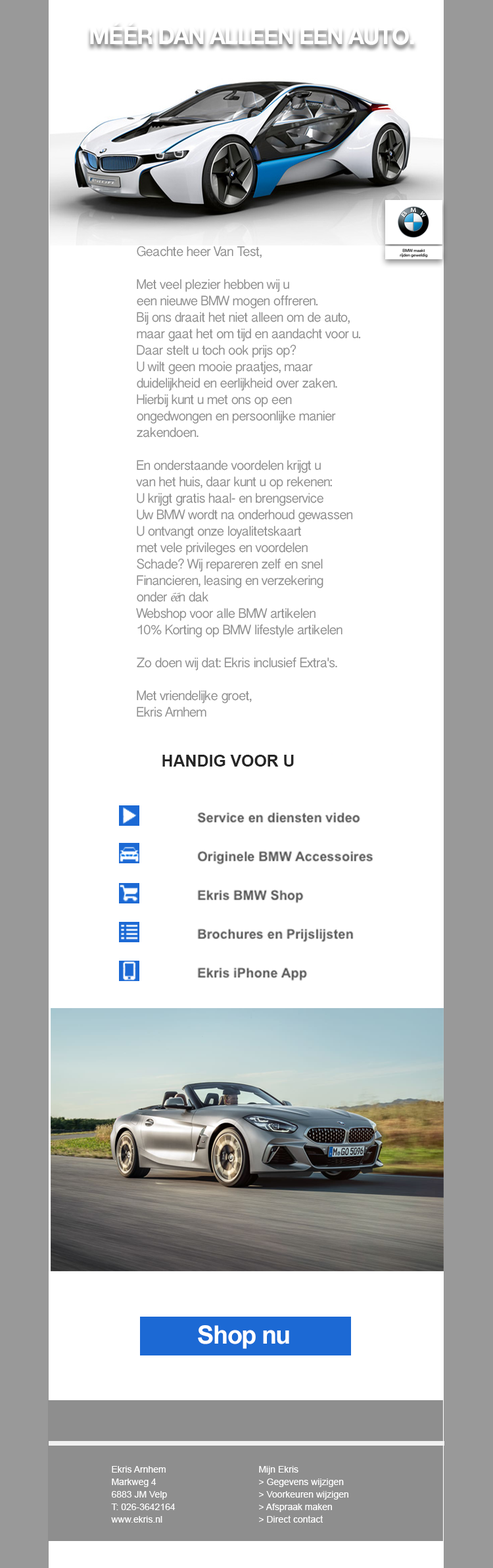
<style>
.page{position:relative;width:493px;height:1568px;background:#ffffff}
.page>*{position:absolute;margin:0}
.t1{font:23.5px "HelveticaNeue-Bold";letter-spacing:-0.045em;color:#ffffff}
.t2{font:13.7px/16.4px "LaoSangamMN";letter-spacing:-0.045em;color:#8d8d8d}
.t3{font:13.7px/16.4px "Marion-Italic";letter-spacing:-0.045em;color:#8d8d8d}
.t4{font:16.3px "Arial-BoldMT";color:#262626}
.t5{font:25.1px "Arial-BoldMT";letter-spacing:-0.045em;color:#ffffff}
.t6{font:9.2px/12.5px "ArialMT";color:#ffffff}
</style>
<div class="page">
<p class="t1" style="left:90px;top:22px;width:325px;height:23px">MÉÉR DAN ALLEEN EEN AUTO.</p>
<p class="t2" style="left:136px;top:246px;width:225px;height:471px;text-align:justify">Geachte heer Van Test,<br><br>Met veel plezier hebben wij u <br>een nieuwe BMW mogen offreren. <br>Bij ons draait het niet alleen om de auto, <br>maar gaat het om tijd en aandacht voor u. <br>Daar stelt u toch ook prijs op? <br>U wilt geen mooie praatjes, maar <br>duidelijkheid en eerlijkheid over zaken. <br>Hierbij kunt u met ons op een <br>ongedwongen en persoonlijke manier <br>zakendoen.<br><br>En onderstaande voordelen krijgt u <br>van het huis, daar kunt u op rekenen:<br>U krijgt gratis haal- en brengservice<br>Uw BMW wordt na onderhoud gewassen<br>U ontvangt onze loyalitetskaart <br>met vele privileges en voordelen<br>Schade? Wij repareren zelf en snel<br>Financieren, leasing en verzekering <br>onder <span class="t3">éé</span>n dak<br>Webshop voor alle BMW artikelen<br>10% Korting op BMW lifestyle artikelen<br><br>Zo doen wij dat: Ekris inclusief Extra's.<br><br>Met vriendelijke groet,<br>Ekris Arnhem</p>
<p class="t4" style="left:163px;top:755px;width:131px;height:12px">HANDIG VOOR U</p>
<p class="t5" style="left:198px;top:1325px;width:92px;height:24px">Shop nu</p>
<p class="t6" style="left:111px;top:1466px;width:65px;height:57px;text-align:justify">Ekris Arnhem<br>Markweg 4<br>6883 JM Velp<br>T: 026-3642164<br>www.ekris.nl</p>
<p class="t6" style="left:259px;top:1466px;width:90px;height:57px;text-align:justify">Mijn Ekris<br>&gt; Gegevens wijzigen<br>&gt; Voorkeuren wijzigen<br>&gt; Afspraak maken<br>&gt; Direct contact</p>
</div>
